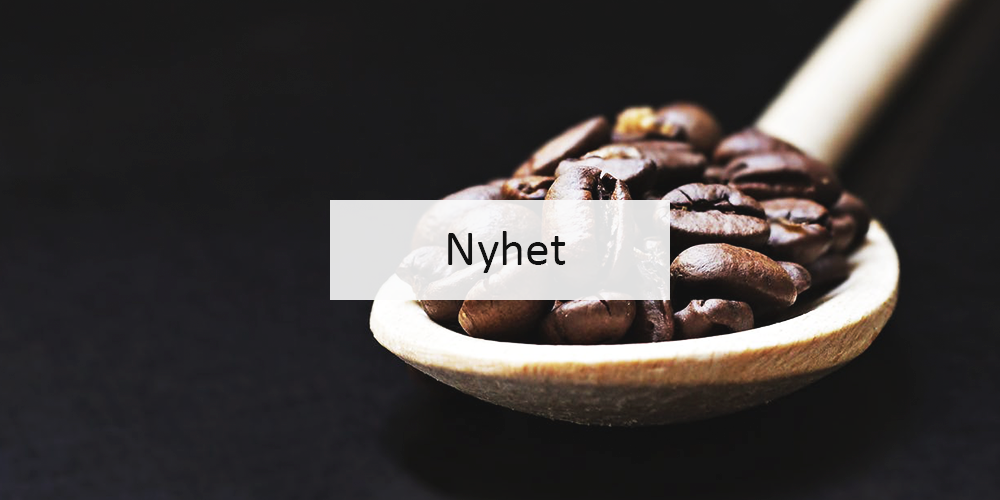
<style>
.page{position:relative;width:1000px;height:500px}
.page>*{position:absolute;margin:0}
.t1{font:50px "Calibri";color:#000000}
</style>
<div class="page">
<p class="t1" style="left:448px;top:231px;width:118px;height:42px">Nyhet</p>
</div>
